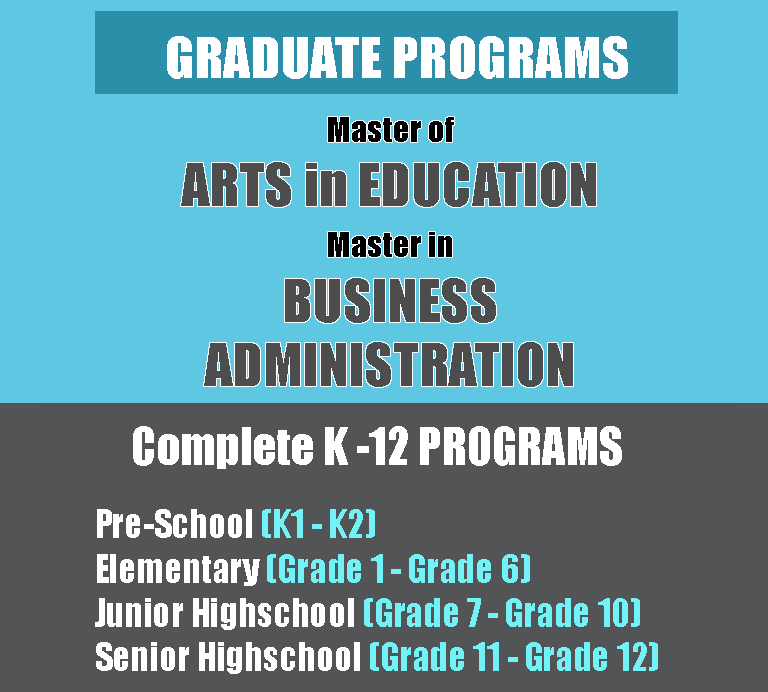
<style>
.page{position:relative;width:768px;height:692px;background:#5ec7e1}
.page>*{position:absolute;margin:0}
.t1{font:52.3px "Impact";color:#ffffff;scale:1.03 1}
.t2{font:53.8px "Impact";color:#4d4d4d;scale:1.03 1}
.t3{font:32.3px "Impact";color:#000000;scale:1.03 1}
.t4{font:48px "Impact";color:#ffffff;scale:0.96 1}
.t5{font:36.9px "Impact";color:#72f1f6;scale:0.96 1}
.t6{font:36.9px "Impact";color:#ffffff;scale:0.96 1}
.t7{font:36.9px "Impact";color:#fffefe;scale:0.96 1}
</style>
<div class="page">
<p class="t1" style="left:167px;top:36px;width:461px;height:43px">GRADUATE PROGRAMS</p>
<p class="t2" style="left:181px;top:117px;width:415px;height:90px;text-align:center"><span class="t3">Master of<br></span>ARTS in EDUCATION</p>
<p class="t2" style="left:204px;top:232px;width:369px;height:155px;text-align:center"><span class="t3">Master in<br></span>BUSINESS<br>ADMINISTRATION</p>
<p class="t4" style="left:133px;top:426px;width:489px;height:43px">Complete K -12 PROGRAMS</p>
<p class="t5" style="left:95px;top:509px;width:563px;height:165px"><span class="t6">Pre-School </span>(K1 - K2)<br><span class="t6">Elementary </span>(Grade 1 - Grade 6)<br><span class="t7">Junior Highschool </span>(Grade 7 - Grade 10)<br><span class="t6">Senior Highschool </span>(Grade 11 - Grade 12)</p>
</div>
